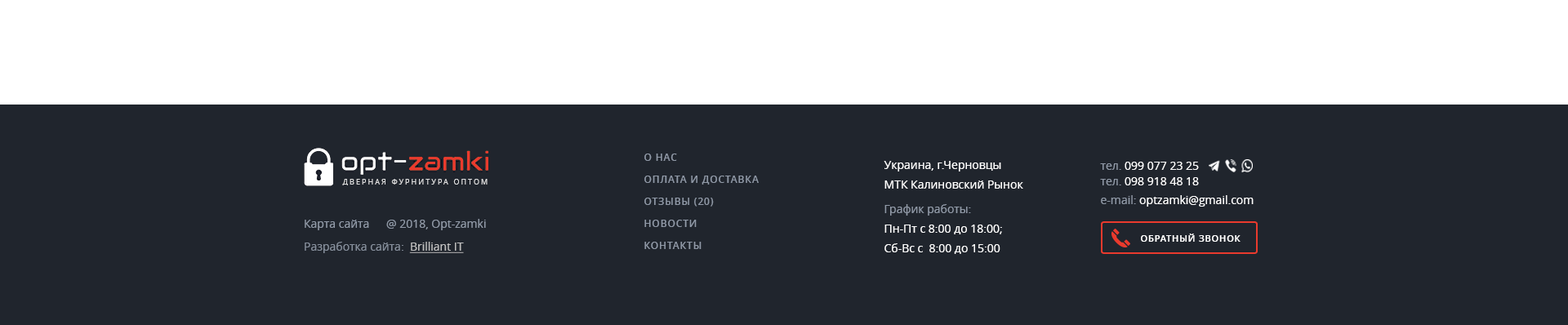
<style>
.page{position:relative;width:1568px;height:325px;background:#20252d}
.page>*{position:absolute;margin:0}
.t1{font:9.8px/22.1px "OpenSans-Semibold";letter-spacing:0.07em;color:#9099a7;text-transform:uppercase}
.t2{font:11.4px/19.6px "OpenSans";color:#ffffff}
.t3{font:11.4px/24.5px "OpenSans";color:#9099a7}
.t4{font:11.4px/18.8px "OpenSans";color:#ffffff}
.t5{font:11.4px/18.8px "OpenSans";color:#9099a7}
.t6{font:11.4px/15.5px "OpenSans";color:#ffffff}
.t7{font:11.4px/15.5px "OpenSans";color:#9099a7}
.t8{font:7.1px "OpenSans";letter-spacing:0.26em;color:#dfdfe0;text-transform:uppercase}
.t9{font:11.4px "OpenSans";color:#9099a7}
.t10{font:9px "OpenSans-Semibold";letter-spacing:0.075em;color:#ffffff;text-transform:uppercase}
.t11{font:11.4px "OpenSans";color:#868f9c}
.t12{font:11.4px "OpenSans";color:#bebebe;text-decoration:underline}
</style>
<div class="page">
<p class="t1" style="left:644px;top:154px;width:115px;height:95px">о нас<br>оплата и доставка<br>Отзывы (20)<br>НОВОСТИ<br>Контакты</p>
<p class="t2" style="left:884px;top:161px;width:139px;height:93px">Украина, г.Черновцы<br>МТК Калиновский Рынок<br><span class="t3">График работы:<br></span>Пн-Пт с 8:00 до 18:00;<br>Сб-Вс с  8:00 до 15:00</p>
<p class="t4" style="left:1100px;top:162px;width:154px;height:45px"><span class="t5">тел.</span> 099 077 23 2<span class="t6">5<br></span><span class="t7">тел.</span><span class="t6"> 098 918 48 18<br></span><span class="t5">e-mail: </span>optzamki@gmail.com</p>
<p class="t8" style="left:342px;top:179px;width:146px;height:6px">Дверная фурнитура оптом</p>
<p class="t9" style="left:305px;top:220px;width:64px;height:10px">Карта сайта</p>
<p class="t9" style="left:386px;top:219px;width:100px;height:11px">@ 2018, Opt-zamki</p>
<p class="t10" style="left:1141px;top:234px;width:100px;height:8px">Обратный звонок</p>
<p class="t11" style="left:305px;top:242px;width:159px;height:11px">Разработка сайта:  <span class="t12">Brilliant IT</span></p>
</div>
